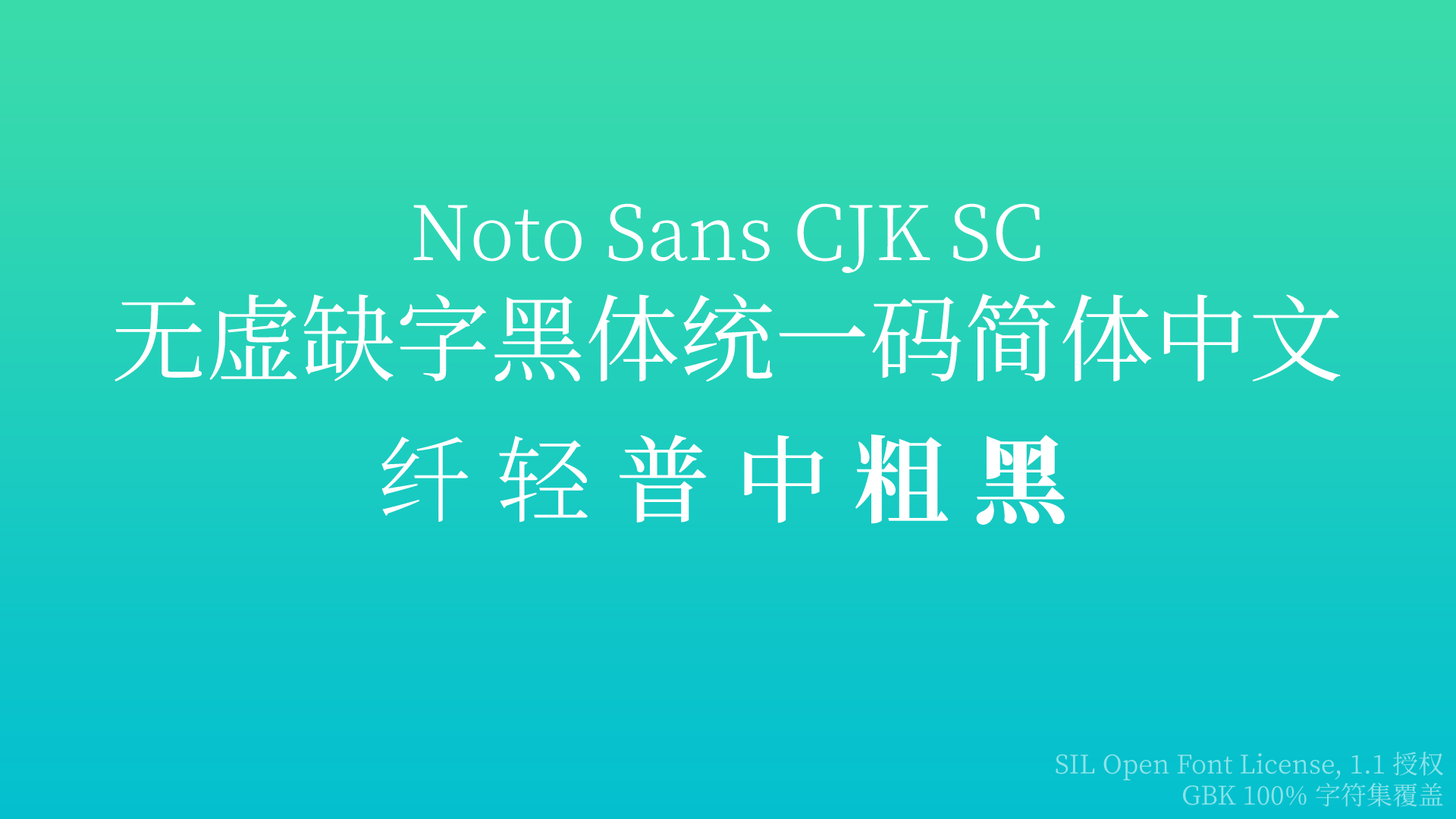
<style>
.page{position:relative;width:1456px;height:819px}
.page>*{position:absolute;margin:0}
.t1{font:75.8px "NotoSerifCJKsc-Light";color:#ffffff}
.t2{font:94.8px "NotoSerifCJKsc-Regular";color:#ffffff}
.t3{font:94.8px "NotoSerifCJKsc-Medium";color:#ffffff}
.t4{font:94.8px "NotoSerifCJKsc-ExtraLight";color:#ffffff}
.t5{font:94.8px "NotoSerifCJKsc-Light";color:#ffffff}
.t6{font:94.8px "NotoSerifCJKsc-Bold";color:#ffffff}
.t7{font:94.8px "NotoSerifCJKsc-Black";color:#ffffff}
.t8{font:25.8px "NotoSerifCJKsc-Regular";color:#8de3e9}
</style>
<div class="page">
<p class="t1" style="left:115px;top:203px;width:1226px;height:182px;text-align:center">Noto Sans CJK SC<span class="t2"><br>无虚缺字黑体统一码简体中文</span></p>
<p class="t3" style="left:381px;top:434px;width:694px;height:98px"><span class="t4">纤 </span><span class="t5">轻 </span>普 中 <span class="t6">粗 </span><span class="t7">黑</span></p>
<p class="t8" style="left:1056px;top:751px;width:388px;height:56px;text-align:right">SIL Open Font License, 1.1 授权<br> GBK 100% 字符集覆盖</p>
</div>
